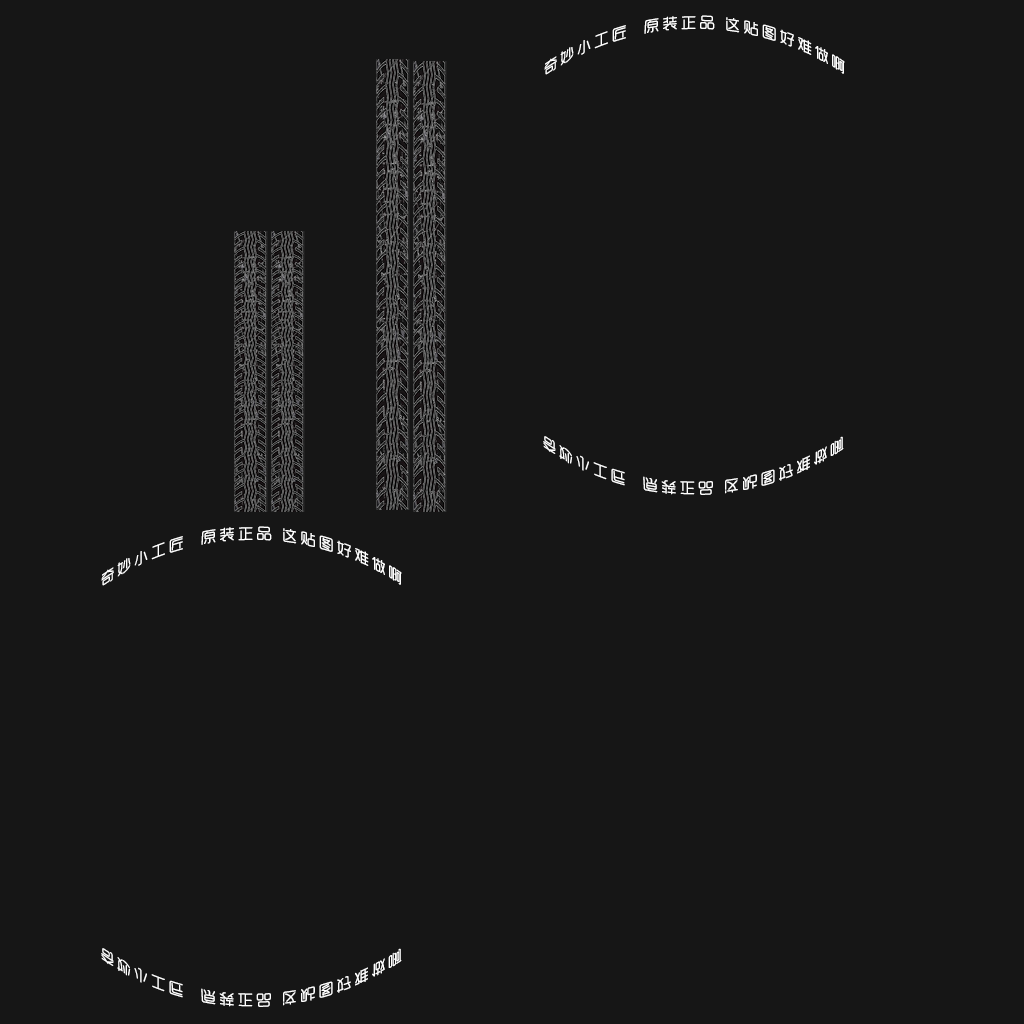
<style>
.page{position:relative;width:1024px;height:1024px;background:#161616}
.page>*{position:absolute;margin:0}
.t1{font:14.8px "MFYueYuan_Noncommercial-Regular";letter-spacing:0.2em;color:#ffffff}
</style>
<div class="page">
<p class="t1" style="left:544px;top:15px;width:301px;height:60px;text-align:center">奇妙小工匠  原装正品 这贴图好难做啊</p>
<p class="t1" style="left:543px;top:436px;width:301px;height:59px;text-align:center">奇妙小工匠  原装正品 这贴图好难做啊</p>
<p class="t1" style="left:101px;top:526px;width:301px;height:60px;text-align:center">奇妙小工匠  原装正品 这贴图好难做啊</p>
<p class="t1" style="left:101px;top:948px;width:301px;height:59px;text-align:center">奇妙小工匠  原装正品 这贴图好难做啊</p>
</div>
